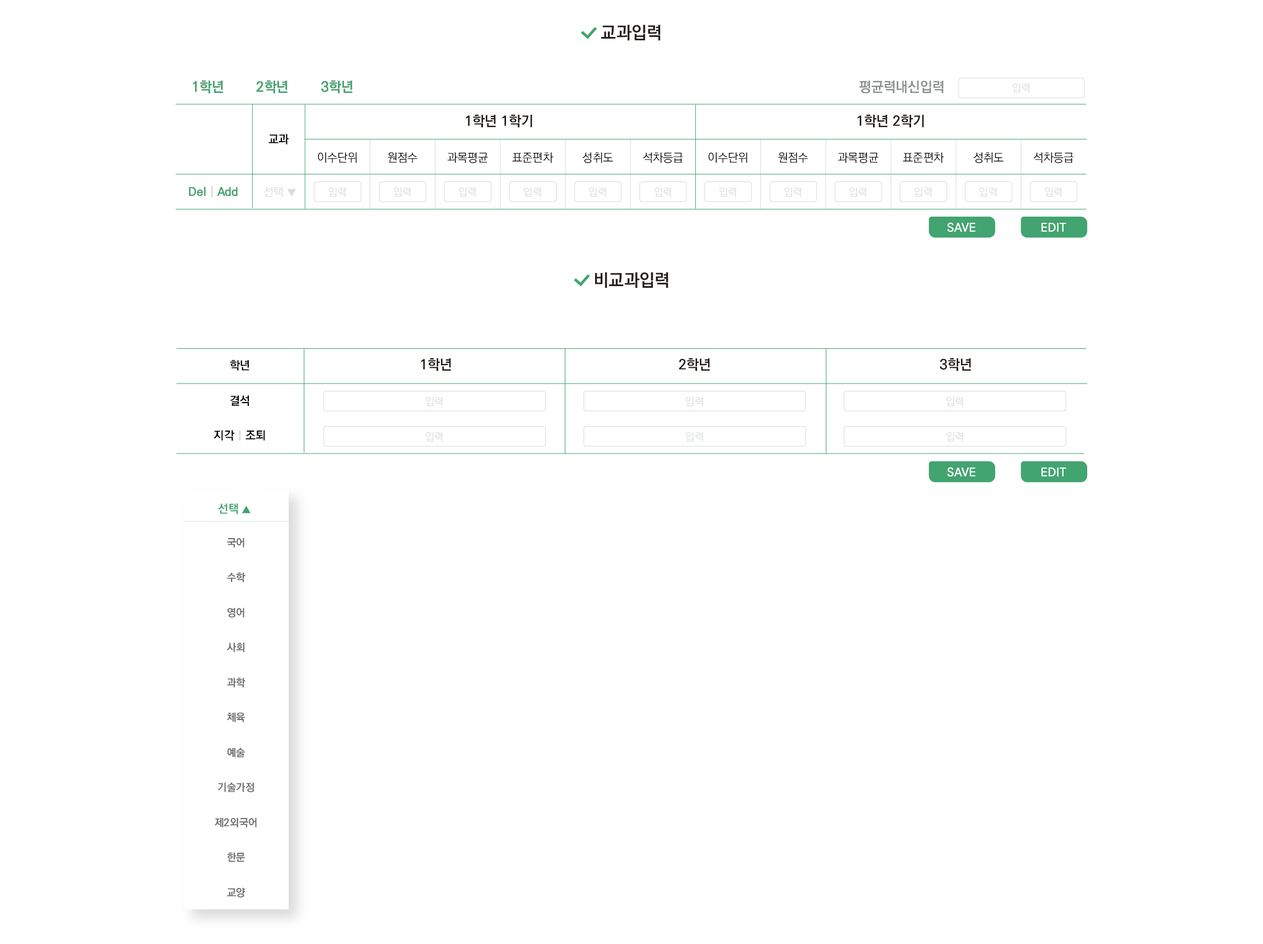
<style>
.page{position:relative;width:1263px;height:944px;background:#ffffff}
.page>*{position:absolute;margin:0}
.t1{font:17.5px "KoPubWorldDotumPB";color:#281e1c}
.t2{font:14px "KoPubWorldDotumPB";color:#41a470}
.t3{font:14px "KoPubWorldDotumPB";color:#42a470}
.t4{font:14px "KoPubWorldDotumPB";color:#8c9091}
.t5{font:10.5px "KoPubWorldDotumPL";color:#dbdcdc}
.t6{font:14px "KoPubWorldDotumPB";color:#231815}
.t7{font:11.7px "KoPubWorldDotumPB";color:#040000}
.t8{font:11.7px "KoPubWorldDotumPL";color:#040000}
.t9{font:11.7px "KoPubWorldDotumPB";color:#41a470}
.t10{font:11.7px "KoPubWorldDotumPB";color:#42a470}
.t11{font:11.7px "KoPubWorldDotumPB";color:#dbdcdc}
.t12{font:11.7px "KoPubWorldDotumPL";color:#dbdcdc}
.t13{font:9.3px "KoPubWorldDotumPL";color:#dbdcdc}
.t14{font:11.7px "KoPubWorldDotumPB";color:#ffffff}
.t15{font:11.7px "KoPubWorldDotumPB";color:#d9dada}
.t16{font:9.3px "KoPubWorldDotumPL";color:#42a470}
.t17{font:10.5px/35px "KoPubWorldDotumPB";color:#717071}
</style>
<div class="page">
<p class="t1" style="left:600px;top:25px;width:60px;height:16px">교과입력</p>
<p class="t2" style="left:193px;top:80px;width:30px;height:14px">1학년</p>
<p class="t3" style="left:193px;top:80px;width:30px;height:14px">1학년</p>
<p class="t2" style="left:256px;top:80px;width:31px;height:14px">2학년</p>
<p class="t3" style="left:256px;top:80px;width:31px;height:14px">2학년</p>
<p class="t2" style="left:321px;top:80px;width:31px;height:14px">3학년</p>
<p class="t3" style="left:321px;top:80px;width:31px;height:14px">3학년</p>
<p class="t4" style="left:859px;top:81px;width:84px;height:13px">평균력내신입력</p>
<p class="t5" style="left:1012px;top:83px;width:18px;height:10px">입력</p>
<p class="t6" style="left:465px;top:114px;width:67px;height:14px">1학년 1학기</p>
<p class="t6" style="left:857px;top:114px;width:67px;height:14px">1학년 2학기</p>
<p class="t7" style="left:268px;top:134px;width:21px;height:11px">교과</p>
<p class="t8" style="left:318px;top:152px;width:39px;height:11px">이수단위</p>
<p class="t8" style="left:388px;top:152px;width:29px;height:11px">원점수</p>
<p class="t8" style="left:447px;top:152px;width:41px;height:12px">과목평균</p>
<p class="t8" style="left:512px;top:152px;width:41px;height:11px">표준편차</p>
<p class="t8" style="left:582px;top:152px;width:31px;height:12px">성취도</p>
<p class="t8" style="left:643px;top:152px;width:40px;height:12px">석차등급</p>
<p class="t8" style="left:708px;top:152px;width:39px;height:11px">이수단위</p>
<p class="t8" style="left:778px;top:152px;width:30px;height:11px">원점수</p>
<p class="t8" style="left:837px;top:152px;width:41px;height:12px">과목평균</p>
<p class="t8" style="left:902px;top:152px;width:42px;height:11px">표준편차</p>
<p class="t8" style="left:973px;top:152px;width:30px;height:12px">성취도</p>
<p class="t8" style="left:1033px;top:152px;width:40px;height:12px">석차등급</p>
<p class="t9" style="left:189px;top:186px;width:49px;height:11px">Del | Add</p>
<p class="t9" style="left:189px;top:186px;width:49px;height:11px">Del | Add</p>
<p class="t10" style="left:189px;top:186px;width:49px;height:11px">Del<span class="t11"> | </span>Add</p>
<p class="t12" style="left:263px;top:187px;width:33px;height:10px">선택 <span class="t13">▼</span></p>
<p class="t5" style="left:329px;top:187px;width:17px;height:10px">입력</p>
<p class="t5" style="left:394px;top:187px;width:17px;height:10px">입력</p>
<p class="t5" style="left:459px;top:187px;width:17px;height:10px">입력</p>
<p class="t5" style="left:524px;top:187px;width:17px;height:10px">입력</p>
<p class="t5" style="left:589px;top:187px;width:17px;height:10px">입력</p>
<p class="t5" style="left:654px;top:187px;width:17px;height:10px">입력</p>
<p class="t5" style="left:719px;top:187px;width:17px;height:10px">입력</p>
<p class="t5" style="left:784px;top:187px;width:17px;height:10px">입력</p>
<p class="t5" style="left:849px;top:187px;width:17px;height:10px">입력</p>
<p class="t5" style="left:914px;top:187px;width:18px;height:10px">입력</p>
<p class="t5" style="left:979px;top:187px;width:18px;height:10px">입력</p>
<p class="t5" style="left:1045px;top:187px;width:17px;height:10px">입력</p>
<p class="t14" style="left:947px;top:222px;width:28px;height:10px">SAVE</p>
<p class="t14" style="left:947px;top:222px;width:28px;height:10px">SAVE</p>
<p class="t14" style="left:1041px;top:223px;width:25px;height:9px">EDIT</p>
<p class="t14" style="left:1041px;top:223px;width:25px;height:9px">EDIT</p>
<p class="t1" style="left:595px;top:272px;width:73px;height:16px">비교과입력</p>
<p class="t7" style="left:230px;top:360px;width:19px;height:11px">학년</p>
<p class="t6" style="left:421px;top:358px;width:30px;height:13px">1학년</p>
<p class="t6" style="left:678px;top:358px;width:32px;height:13px">2학년</p>
<p class="t6" style="left:939px;top:358px;width:32px;height:13px">3학년</p>
<p class="t7" style="left:230px;top:395px;width:19px;height:11px">결석</p>
<p class="t5" style="left:426px;top:397px;width:17px;height:10px">입력</p>
<p class="t5" style="left:686px;top:397px;width:17px;height:10px">입력</p>
<p class="t5" style="left:946px;top:397px;width:17px;height:10px">입력</p>
<p class="t7" style="left:213px;top:430px;width:52px;height:11px">지각 <span class="t15">| </span>조퇴</p>
<p class="t5" style="left:426px;top:432px;width:17px;height:10px">입력</p>
<p class="t5" style="left:686px;top:432px;width:17px;height:10px">입력</p>
<p class="t5" style="left:946px;top:432px;width:17px;height:10px">입력</p>
<p class="t14" style="left:947px;top:467px;width:28px;height:10px">SAVE</p>
<p class="t14" style="left:947px;top:467px;width:28px;height:10px">SAVE</p>
<p class="t14" style="left:1041px;top:468px;width:25px;height:9px">EDIT</p>
<p class="t14" style="left:1041px;top:468px;width:25px;height:9px">EDIT</p>
<p class="t10" style="left:218px;top:504px;width:32px;height:10px">선택 <span class="t16">▲</span></p>
<p class="t17" style="left:215px;top:538px;width:42px;height:360px;text-align:center">국어<br>수학<br>영어<br>사회<br>과학<br>체육<br>예술<br>기술가정<br>제2외국어<br>한문<br>교양</p>
</div>
